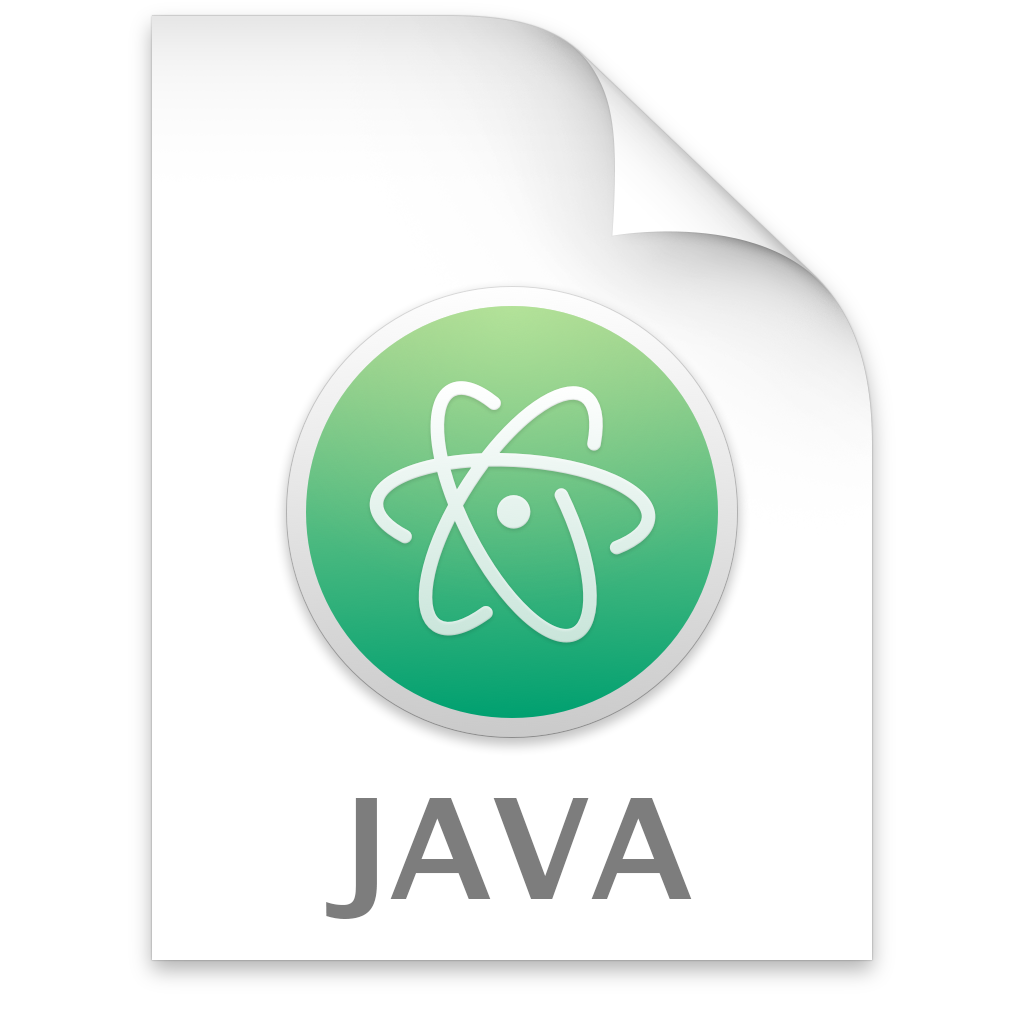
<style>
.page{position:relative;width:1024px;height:1024px;background:#ffffff}
.page>*{position:absolute;margin:0}
.t1{font:140px "LucidaGrande-Bold";color:#7d7d7d}
</style>
<div class="page">
<p class="t1" style="left:326px;top:798px;width:366px;height:121px">JAVA</p>
</div>
